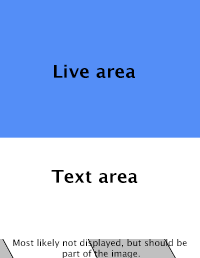
<style>
.page{position:relative;width:200px;height:258px;background:#548ef7}
.page>*{position:absolute;margin:0}
.t1{font:17.9px "LucidaGrande-Bold";color:#000000}
.t2{font:8.9px "LucidaGrande";color:#000000}
</style>
<div class="page">
<p class="t1" style="left:54px;top:64px;width:81px;height:14px">Live area</p>
<p class="t1" style="left:51px;top:170px;width:87px;height:13px">Text area</p>
<p class="t2" style="left:13px;top:239px;width:174px;height:20px;text-align:center">Most likely not displayed, but should be <br>part of the image.</p>
</div>
